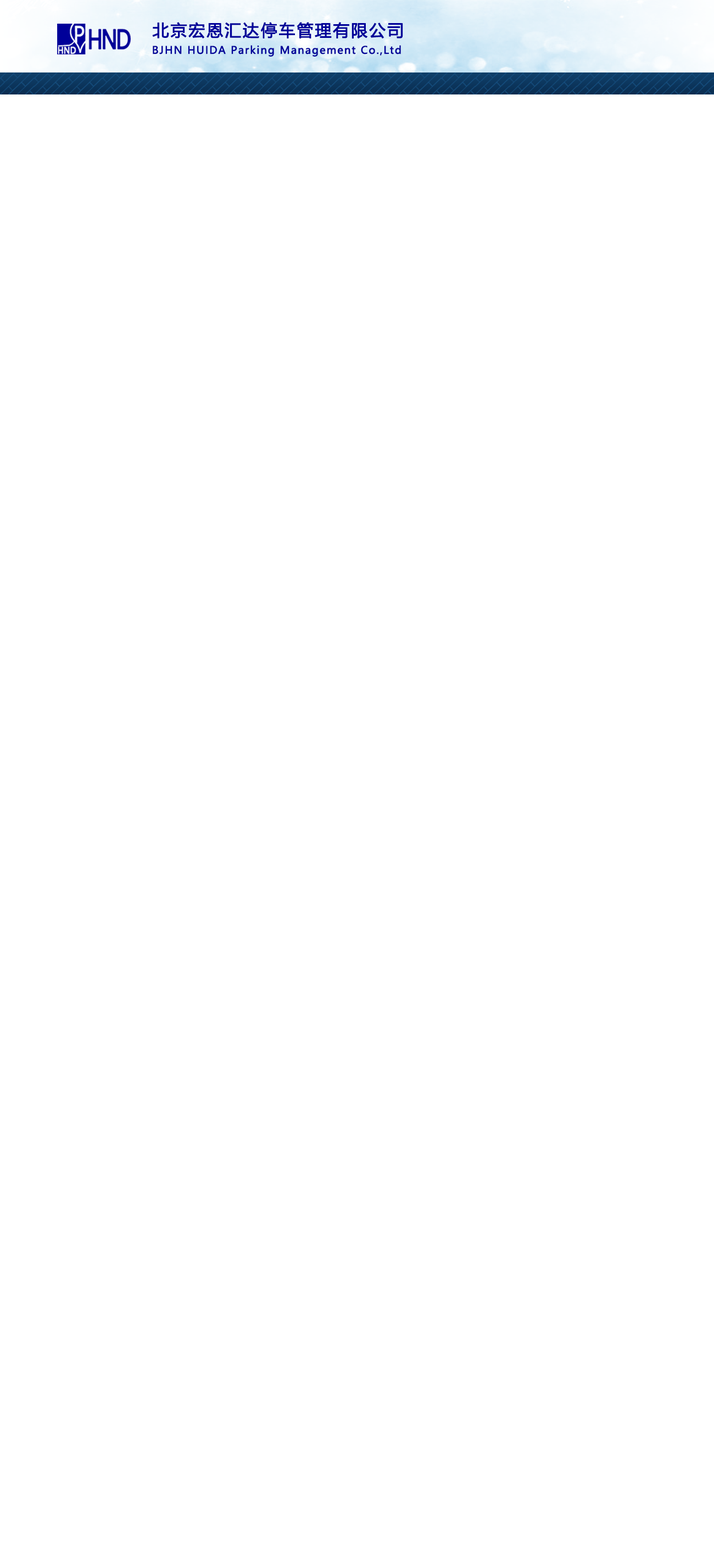
<style>
.page{position:relative;width:714px;height:1568px;background:#ffffff}
.page>*{position:absolute;margin:0}
.t1{font:16.2px "MicrosoftYaHei";letter-spacing:0.08em;color:#000099;font-weight:bold}
.t2{font:10.2px "MicrosoftYaHei";letter-spacing:0.08em;color:#000099;font-weight:bold}
</style>
<div class="page">
<p class="t1" style="left:152px;top:22px;width:251px;height:17px">北京宏恩汇达停车管理有限公司</p>
<p class="t2" style="left:153px;top:45px;width:248px;height:12px">BJHN HUIDA Parking Management Co.,Ltd</p>
</div>
